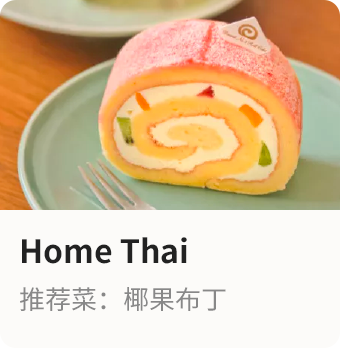
<style>
.page{position:relative;width:340px;height:348px;background:#fcfbf9}
.page>*{position:absolute;margin:0}
.t1{font:32px "SourceHanSansCN-Bold";color:#222222}
.t2{font:26px "SourceHanSansCN-Regular";color:#888888}
</style>
<div class="page">
<p class="t1" style="left:22px;top:237px;width:165px;height:27px">Home Thai</p>
<p class="t2" style="left:20px;top:287px;width:206px;height:24px">推荐菜：椰果布丁</p>
</div>
